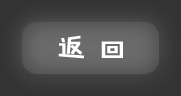
<style>
.page{position:relative;width:181px;height:96px}
.page>*{position:absolute;margin:0}
.t1{font:29.2px "FZJHJW--GB1-0";letter-spacing:0.38em;color:#ffffff;font-weight:bold}
</style>
<div class="page">
<p class="t1" style="left:58px;top:35px;width:65px;height:24px">返回</p>
</div>
